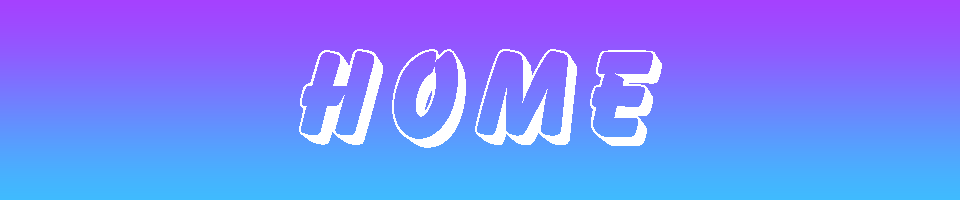
<style>
.page{position:relative;width:960px;height:200px}
.page>*{position:absolute;margin:0}
.t1{font:144px "BalloonDroShaD";letter-spacing:0.05em;color:#ffffff;text-transform:uppercase}
</style>
<div class="page">
<p class="t1" style="left:299px;top:49px;width:363px;height:99px">home</p>
</div>
